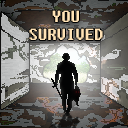
<style>
.page{position:relative;width:128px;height:128px}
.page>*{position:absolute;margin:0}
.t1{font:15px "Fixedsys";color:#ffe3b7}
</style>
<div class="page">
<p class="t1" style="left:29px;top:10px;width:74px;height:30px;text-align:center">YOU <br>SURVIVED</p>
</div>
